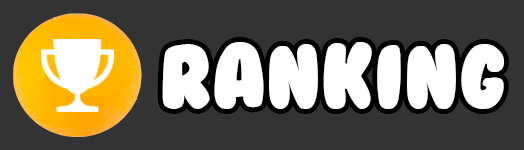
<style>
.page{position:relative;width:524px;height:150px;background:#333333}
.page>*{position:absolute;margin:0}
.t1{font:84px "BubbleGum";color:#ffffff}
</style>
<div class="page">
<p class="t1" style="left:162px;top:42px;width:342px;height:67px">Ranking</p>
</div>
